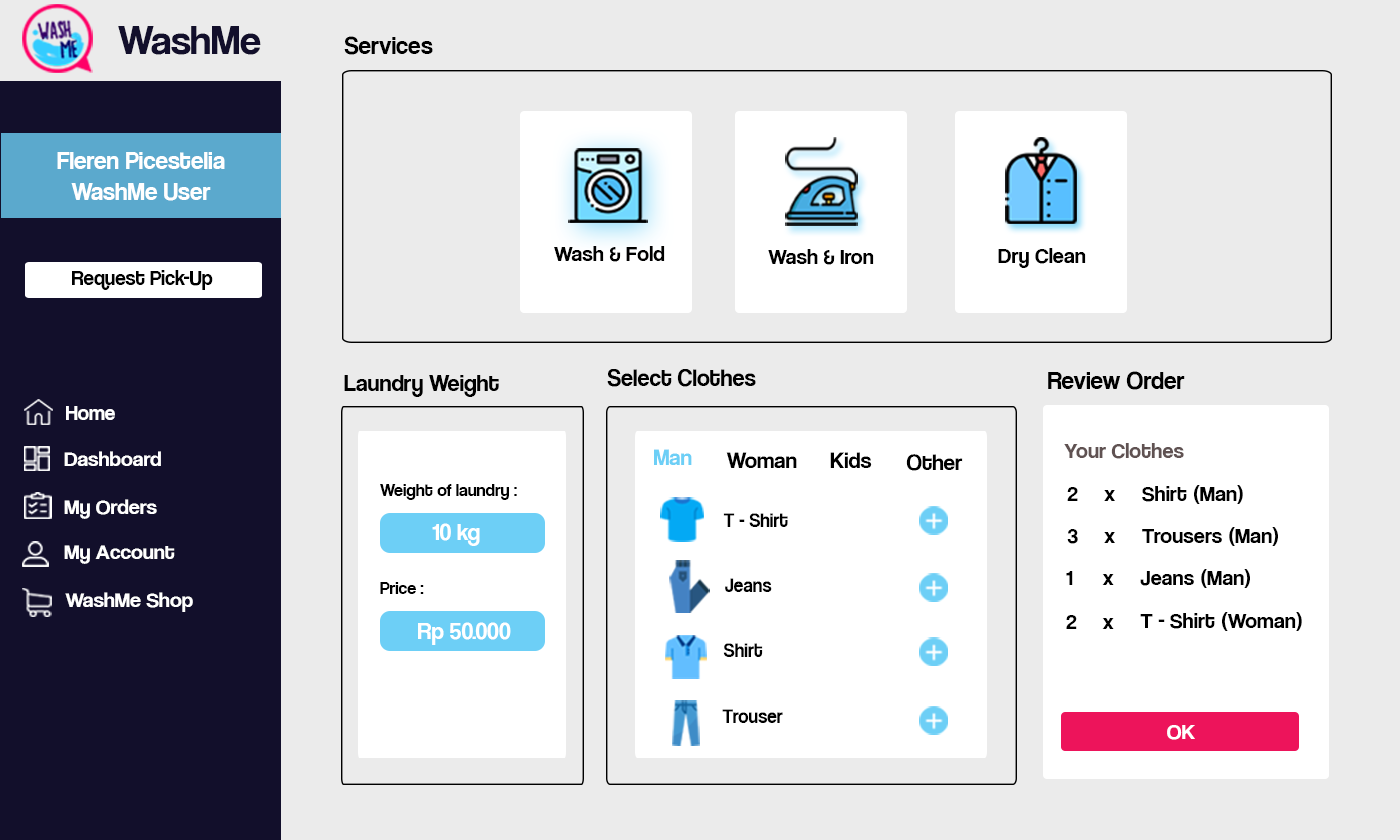
<style>
.page{position:relative;width:1400px;height:840px;background:#ebebeb}
.page>*{position:absolute;margin:0}
.t1{font:42px "CoolveticaRg-Regular";color:#120f2b}
.t2{font:25.2px "CoolveticaRg-Regular";color:#000000}
.t3{font:25.2px "CoolveticaRg-Regular";color:#ffffff}
.t4{font:22.4px "CoolveticaRg-Regular";color:#000000}
.t5{font:21px "CoolveticaRg-Regular";color:#000000}
.t6{font:24px "CoolveticaRg-Regular";color:#000000}
.t7{font:25.2px "CoolveticaRg-Regular";color:#000000;scale:0.96 1}
.t8{font:21px "CoolveticaRg-Regular";color:#ffffff}
.t9{font:22.4px "CoolveticaRg-Regular";color:#6dcff6}
.t10{font:22.4px "CoolveticaRg-Regular";color:#605252}
.t11{font:21px "CoolveticaRg-Regular";color:#ffffff;scale:1.05 1}
.t12{font:18px "CoolveticaRg-Regular";color:#000000}
.t13{font:20.2px "CoolveticaRg-Regular";color:#000000;scale:0.96 1}
.t14{font:24px "CoolveticaRg-Regular";color:#ffffff}
.t15{font:22.4px "CoolveticaRg-Regular";color:#ffffff}
</style>
<div class="page">
<p class="t1" style="left:118px;top:26px;width:143px;height:29px">WashMe</p>
<p class="t2" style="left:344px;top:36px;width:89px;height:19px">Services</p>
<p class="t3" style="left:57px;top:152px;width:168px;height:49px;text-align:center">Fleren Picestelia<br>WashMe User</p>
<p class="t4" style="left:554px;top:246px;width:111px;height:16px">Wash &amp; Fold</p>
<p class="t4" style="left:768px;top:249px;width:106px;height:16px">Wash &amp; Iron</p>
<p class="t4" style="left:998px;top:248px;width:88px;height:20px">Dry Clean</p>
<p class="t5" style="left:72px;top:270px;width:141px;height:20px">Request Pick-Up</p>
<p class="t6" style="left:344px;top:375px;width:155px;height:22px">Laundry Weight</p>
<p class="t7" style="left:607px;top:369px;width:149px;height:18px">Select Clothes</p>
<p class="t2" style="left:1048px;top:371px;width:137px;height:19px">Review Order</p>
<p class="t8" style="left:66px;top:406px;width:49px;height:14px">Home</p>
<p class="t9" style="left:654px;top:449px;width:38px;height:16px">Man</p>
<p class="t10" style="left:1064px;top:443px;width:120px;height:16px">Your Clothes</p>
<p class="t11" style="left:64px;top:451px;width:97px;height:15px">Dashboard</p>
<p class="t4" style="left:726px;top:452px;width:71px;height:16px">Woman</p>
<p class="t4" style="left:830px;top:452px;width:42px;height:16px">Kids</p>
<p class="t4" style="left:906px;top:454px;width:57px;height:17px">Other</p>
<p class="t12" style="left:380px;top:484px;width:137px;height:16px">Weight of laundry :</p>
<p class="t4" style="left:1142px;top:485px;width:101px;height:19px">Shirt (Man)</p>
<p class="t4" style="left:1067px;top:487px;width:11px;height:14px">2</p>
<p class="t4" style="left:1104px;top:490px;width:11px;height:11px">x</p>
<p class="t11" style="left:64px;top:499px;width:93px;height:20px">My Orders</p>
<p class="t13" style="left:723px;top:513px;width:65px;height:14px">T - Shirt</p>
<p class="t14" style="left:432px;top:523px;width:48px;height:23px">10 kg</p>
<p class="t4" style="left:1067px;top:529px;width:11px;height:15px">3</p>
<p class="t4" style="left:1104px;top:532px;width:11px;height:11px">x</p>
<p class="t4" style="left:1142px;top:527px;width:136px;height:19px">Trousers (Man)</p>
<p class="t11" style="left:64px;top:545px;width:111px;height:19px">My Account</p>
<p class="t4" style="left:1140px;top:569px;width:110px;height:19px">Jeans (Man)</p>
<p class="t12" style="left:380px;top:582px;width:44px;height:12px">Price :</p>
<p class="t13" style="left:725px;top:578px;width:47px;height:14px">Jeans</p>
<p class="t4" style="left:1066px;top:571px;width:7px;height:14px">1</p>
<p class="t4" style="left:1102px;top:574px;width:12px;height:11px">x</p>
<p class="t11" style="left:65px;top:592px;width:128px;height:20px">WashMe Shop</p>
<p class="t4" style="left:1066px;top:615px;width:11px;height:14px">2</p>
<p class="t4" style="left:1140px;top:612px;width:162px;height:19px">T - Shirt (Woman)</p>
<p class="t14" style="left:418px;top:622px;width:93px;height:23px">Rp 50.000</p>
<p class="t4" style="left:1102px;top:618px;width:12px;height:11px">x</p>
<p class="t13" style="left:723px;top:643px;width:40px;height:14px">Shirt</p>
<p class="t13" style="left:722px;top:709px;width:61px;height:14px">Trouser</p>
<p class="t15" style="left:1167px;top:725px;width:28px;height:15px">OK</p>
</div>
